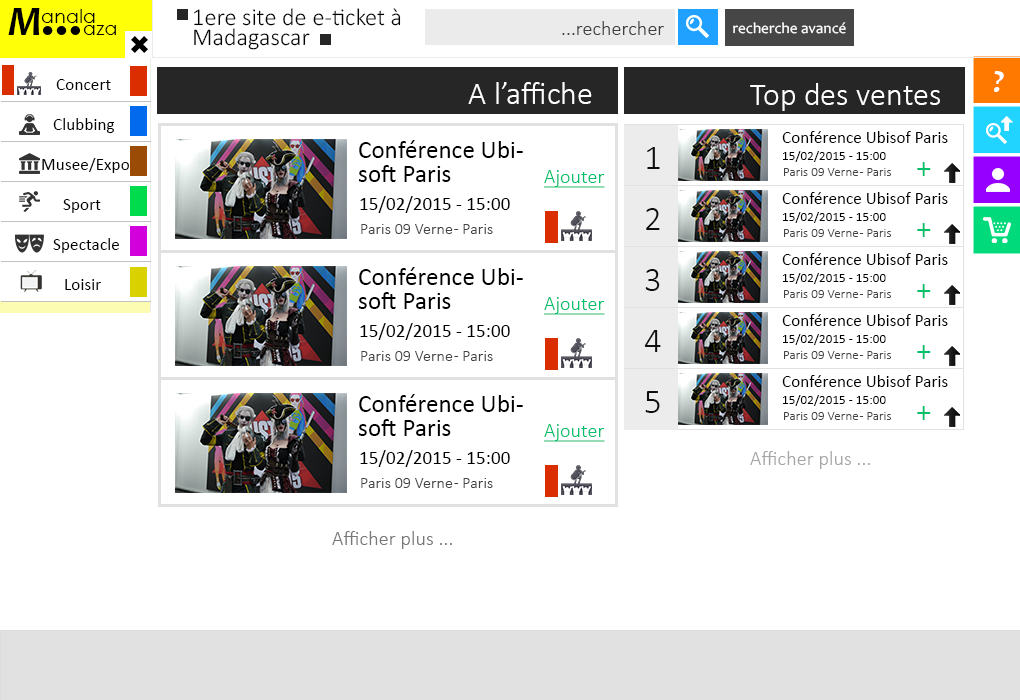
<style>
.page{position:relative;width:1020px;height:700px;background:#ffffff}
.page>*{position:absolute;margin:0}
.t1{font:12px "Candara-BoldItalic";color:#000000}
.t2{font:19.3px "CenturyGothic";color:#000000}
.t3{font:24.3px/20.2px "Calibri-Light";color:#000000}
.t4{font:20.2px "Calibri-Light";color:#3f3f3f}
.t5{font:15.1px "Candara";color:#ffffff}
.t6{font:32.3px "Candara-BoldItalic";color:#ffffff}
.t7{font:17.3px "Calibri";color:#000000}
.t8{font:32.3px "Calibri-Light";color:#ffffff}
.t9{font:17.2px "Calibri";color:#000000}
.t10{font:25.2px/24px "Calibri";color:#000000}
.t11{font:35.2px "Calibri-Light";color:#0e0e0e}
.t12{font:13.2px "Calibri";color:#000000}
.t13{font:20.2px "Calibri-Light";color:#00c06c;text-decoration:underline}
.t14{font:13.2px "Calibri-Light";color:#434343}
.t15{font:31.2px "Calibri-Light";color:#00c06c}
.t16{font:19.2px "Calibri";color:#000000}
.t17{font:16.2px "Calibri-Light";color:#434343}
.t18{font:20.3px "Calibri-Light";color:#a6a6a6}
.t19{font:20.3px "Calibri-Light";color:#787878}
</style>
<div class="page">
<p class="t1" style="left:8px;top:8px;width:32px;height:27px">M</p>
<p class="t2" style="left:41px;top:9px;width:54px;height:14px">anala</p>
<p class="t3" style="left:194px;top:8px;width:207px;height:42px">1ere site de e-ticket à<br>Madagascar</p>
<p class="t2" style="left:83px;top:25px;width:33px;height:10px">aza</p>
<p class="t4" style="left:562px;top:21px;width:102px;height:14px">...rechercher</p>
<p class="t5" style="left:733px;top:22px;width:113px;height:12px">recherche avancé</p>
<p class="t6" style="left:994px;top:71px;width:10px;height:21px">?</p>
<p class="t7" style="left:56px;top:79px;width:55px;height:11px">Concert</p>
<p class="t8" style="left:468px;top:82px;width:124px;height:22px">A l’affiche</p>
<p class="t8" style="left:750px;top:83px;width:190px;height:28px">Top des ventes</p>
<p class="t7" style="left:53px;top:118px;width:62px;height:15px">Clubbing</p>
<p class="t9" style="left:782px;top:131px;width:166px;height:12px">Conférence Ubisof Paris</p>
<p class="t10" style="left:358px;top:140px;width:165px;height:42px">Conférence Ubi-<br>soft Paris</p>
<p class="t11" style="left:647px;top:147px;width:13px;height:22px">1</p>
<p class="t7" style="left:42px;top:158px;width:87px;height:15px">Musee/Expo</p>
<p class="t12" style="left:783px;top:151px;width:103px;height:11px">15/02/2015 - 15:00</p>
<p class="t13" style="left:544px;top:170px;width:61px;height:18px">Ajouter</p>
<p class="t14" style="left:784px;top:168px;width:107px;height:8px">Paris 09 Verne - Paris</p>
<p class="t15" style="left:917px;top:162px;width:14px;height:14px">+</p>
<p class="t16" style="left:360px;top:196px;width:150px;height:17px">15/02/2015 - 15:00</p>
<p class="t9" style="left:782px;top:192px;width:166px;height:12px">Conférence Ubisof Paris</p>
<p class="t7" style="left:63px;top:199px;width:38px;height:14px">Sport</p>
<p class="t11" style="left:646px;top:208px;width:14px;height:22px">2</p>
<p class="t12" style="left:783px;top:212px;width:103px;height:11px">15/02/2015 - 15:00</p>
<p class="t17" style="left:361px;top:224px;width:132px;height:10px">Paris 09 Verne - Paris</p>
<p class="t14" style="left:784px;top:229px;width:107px;height:8px">Paris 09 Verne - Paris</p>
<p class="t15" style="left:917px;top:223px;width:14px;height:14px">+</p>
<p class="t7" style="left:53px;top:238px;width:66px;height:15px">Spectacle</p>
<p class="t9" style="left:782px;top:253px;width:166px;height:12px">Conférence Ubisof Paris</p>
<p class="t10" style="left:358px;top:267px;width:165px;height:42px">Conférence Ubi-<br>soft Paris</p>
<p class="t11" style="left:645px;top:269px;width:15px;height:22px">3</p>
<p class="t7" style="left:65px;top:279px;width:36px;height:11px">Loisir</p>
<p class="t12" style="left:783px;top:273px;width:103px;height:11px">15/02/2015 - 15:00</p>
<p class="t14" style="left:784px;top:290px;width:107px;height:8px">Paris 09 Verne - Paris</p>
<p class="t15" style="left:917px;top:284px;width:14px;height:14px">+</p>
<p class="t13" style="left:544px;top:297px;width:61px;height:18px">Ajouter</p>
<p class="t9" style="left:782px;top:314px;width:166px;height:12px">Conférence Ubisof Paris</p>
<p class="t16" style="left:360px;top:323px;width:150px;height:17px">15/02/2015 - 15:00</p>
<p class="t11" style="left:644px;top:330px;width:17px;height:22px">4</p>
<p class="t12" style="left:783px;top:334px;width:103px;height:11px">15/02/2015 - 15:00</p>
<p class="t17" style="left:361px;top:351px;width:132px;height:10px">Paris 09 Verne - Paris</p>
<p class="t14" style="left:784px;top:351px;width:107px;height:8px">Paris 09 Verne - Paris</p>
<p class="t15" style="left:917px;top:345px;width:14px;height:14px">+</p>
<p class="t9" style="left:782px;top:375px;width:166px;height:12px">Conférence Ubisof Paris</p>
<p class="t10" style="left:358px;top:394px;width:165px;height:42px">Conférence Ubi-<br>soft Paris</p>
<p class="t11" style="left:645px;top:391px;width:15px;height:22px">5</p>
<p class="t12" style="left:783px;top:395px;width:103px;height:11px">15/02/2015 - 15:00</p>
<p class="t14" style="left:784px;top:412px;width:107px;height:8px">Paris 09 Verne - Paris</p>
<p class="t15" style="left:917px;top:406px;width:14px;height:14px">+</p>
<p class="t13" style="left:544px;top:424px;width:61px;height:18px">Ajouter</p>
<p class="t16" style="left:360px;top:450px;width:150px;height:17px">15/02/2015 - 15:00</p>
<p class="t18" style="left:750px;top:451px;width:120px;height:18px">Afficher plus ...</p>
<p class="t17" style="left:361px;top:478px;width:132px;height:10px">Paris 09 Verne - Paris</p>
<p class="t19" style="left:332px;top:531px;width:120px;height:18px">Afficher plus ...</p>
</div>
